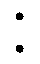
<style>
.page{position:relative;width:40px;height:64px;background:#ffffff}
.page>*{position:absolute;margin:0}
.t1{font:74px "OPPOSans-R";color:#000000}
</style>
<div class="page">
<p class="t1" style="left:16px;top:12px;width:8px;height:41px">:</p>
</div>
